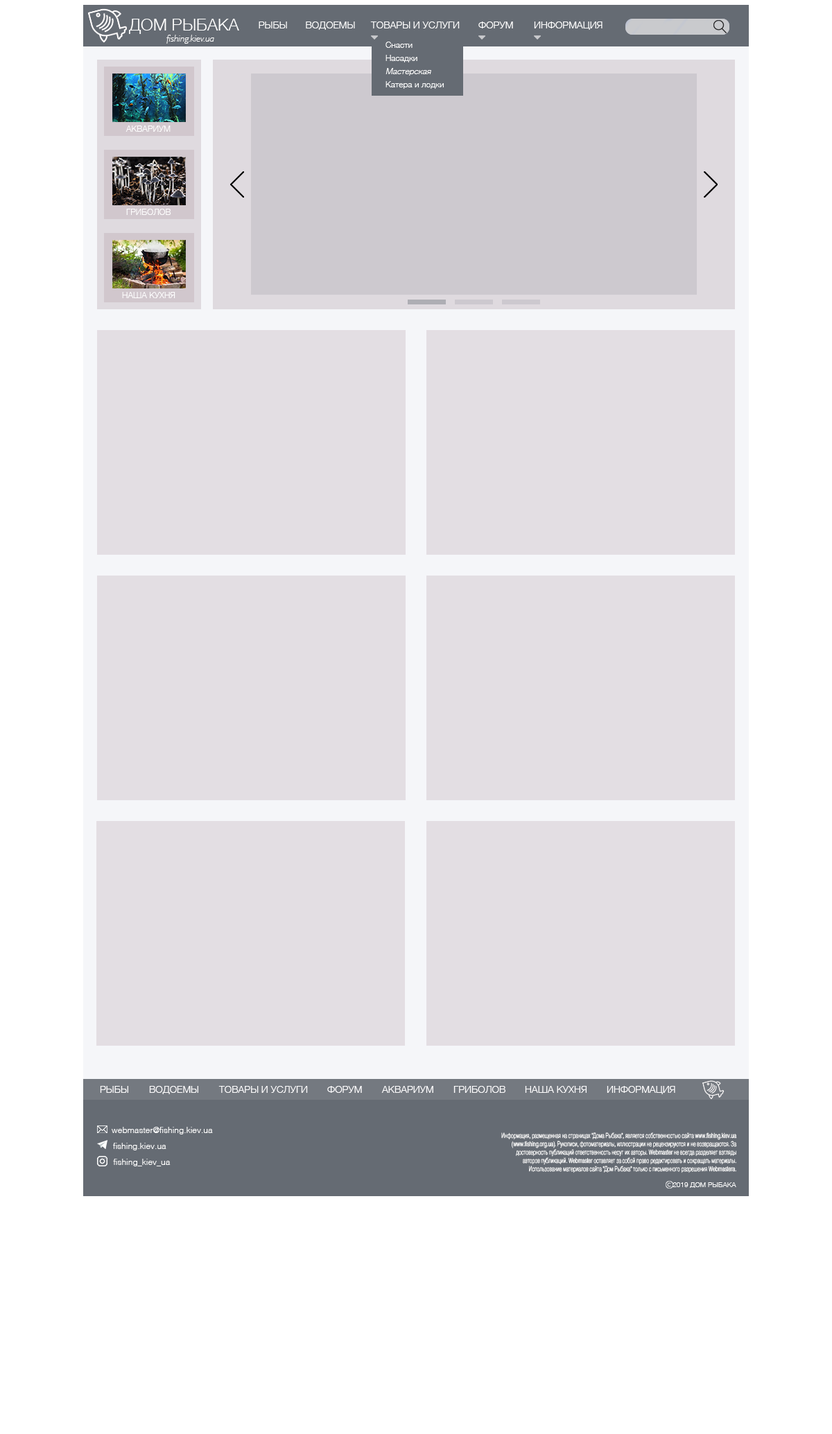
<style>
.page{position:relative;width:832px;height:1434px;background:#e3dee3}
.page>*{position:absolute;margin:0}
.t1{font:16.6px "Helvetica-Light";color:#ffffff}
.t2{font:9.7px "Helvetica-Light";color:#ffffff}
.t3{font:9.7px "GillSans-LightItalic";color:#ffffff}
.t4{font:8.3px "Helvetica-Light";color:#ffffff}
.t5{font:8.3px "Helvetica-LightOblique";color:#ffffff}
.t6{font:8.3px "Helvetica-Light";color:#feffff}
.t7{font:9.7px "Helvetica-Light";color:#fffeff}
.t8{font:6.9px "Helvetica-Light";color:#ffffff;scale:0.67 1}
.t9{font:6.9px "Helvetica-Light";color:#ffffff}
</style>
<div class="page">
<p class="t1" style="left:129px;top:19px;width:110px;height:15px">ДОМ РЫБАКА</p>
<p class="t2" style="left:259px;top:21px;width:28px;height:7px">РЫБЫ</p>
<p class="t2" style="left:306px;top:21px;width:49px;height:9px">ВОДОЕМЫ</p>
<p class="t2" style="left:370px;top:21px;width:90px;height:7px">ТОВАРЫ И УСЛУГИ</p>
<p class="t2" style="left:478px;top:21px;width:35px;height:7px">ФОРУМ</p>
<p class="t2" style="left:534px;top:21px;width:68px;height:9px">ИНФОРМАЦИЯ</p>
<p class="t3" style="left:166px;top:35px;width:48px;height:9px">fishing.kiev.ua</p>
<p class="t4" style="left:385px;top:42px;width:27px;height:6px">Снасти</p>
<p class="t4" style="left:385px;top:55px;width:32px;height:7px">Насадки</p>
<p class="t5" style="left:385px;top:68px;width:46px;height:8px">Мастерская</p>
<p class="t6" style="left:385px;top:81px;width:59px;height:8px">Катера и лодки</p>
<p class="t4" style="left:125px;top:125px;width:46px;height:7px">АКВАРИУМ</p>
<p class="t4" style="left:126px;top:209px;width:45px;height:6px">ГРИБОЛОВ</p>
<p class="t4" style="left:122px;top:292px;width:53px;height:6px">НАША КУХНЯ<br>мм</p>
<p class="t7" style="left:100px;top:1086px;width:28px;height:6px">РЫБЫ</p>
<p class="t7" style="left:149px;top:1086px;width:49px;height:8px">ВОДОЕМЫ</p>
<p class="t7" style="left:218px;top:1086px;width:90px;height:6px">ТОВАРЫ И УСЛУГИ</p>
<p class="t7" style="left:327px;top:1086px;width:35px;height:6px">ФОРУМ</p>
<p class="t7" style="left:381px;top:1086px;width:52px;height:6px">АКВАРИУМ</p>
<p class="t7" style="left:453px;top:1086px;width:52px;height:6px">ГРИБОЛОВм</p>
<p class="t7" style="left:525px;top:1086px;width:61px;height:6px">НАША КУХНЯ</p>
<p class="t7" style="left:607px;top:1086px;width:68px;height:8px">ИНФОРМАЦИЯ</p>
<p class="t4" style="left:112px;top:1126px;width:101px;height:8px">webmaster@fishing.kiev.ua</p>
<p class="t8" style="left:501px;top:1132px;width:236px;height:41px;text-align:right">Информация, размещенная на страницах "Дома Рыбака", является собственностью сайта www.fishing.kiev.ua (www.fishing.org.ua). Рукописи, фотоматериалы, иллюстрации не рецензируются и не возвращаются. За достоверность публикаций ответственность несут их авторы. Webmaster не всегда разделяет взгляды авторов публикаций. Webmaster оставляет за собой право редактировать и сокращать материалы.<br>Использование материалов сайта "Дом Рыбака" только с письменного разрешения Webmastera.</p>
<p class="t4" style="left:113px;top:1142px;width:53px;height:8px">fishing.kiev.ua</p>
<p class="t4" style="left:113px;top:1158px;width:58px;height:8px">fishing_kiev_ua</p>
<p class="t9" style="left:672px;top:1182px;width:64px;height:5px">2019 ДОМ РЫБАКА</p>
</div>
